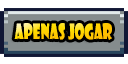
<style>
.page{position:relative;width:128px;height:64px;background:#ffffff}
.page>*{position:absolute;margin:0}
.t1{font:20.6px "ShowcardGothic-Reg";scale:0.68 1}
</style>
<div class="page">
<p class="t1" style="left:14px;top:23px;width:98px;height:17px">aPENAS jOGAR</p>
</div>
